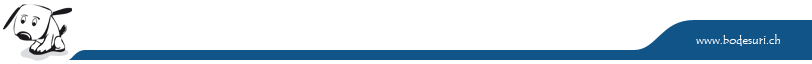
<style>
.page{position:relative;width:812px;height:64px;background:#ffffff}
.page>*{position:absolute;margin:0}
.t1{font:12px "TempusSansITC";color:#fffefe}
</style>
<div class="page">
<p class="t1" style="left:696px;top:34px;width:84px;height:12px">www.bodesuri.ch</p>
</div>
